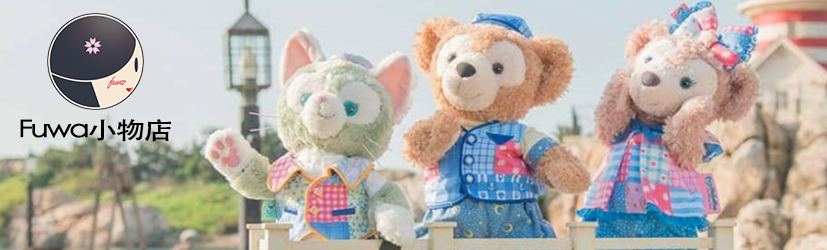
<style>
.page{position:relative;width:827px;height:250px}
.page>*{position:absolute;margin:0}
.t1{font:24px "STHeitiTC-Medium";letter-spacing:-0.075em;color:#000000;scale:1.25 1}
</style>
<div class="page">
<p class="t1" style="left:20px;top:119px;width:151px;height:23px">Fuwa小物店</p>
</div>
